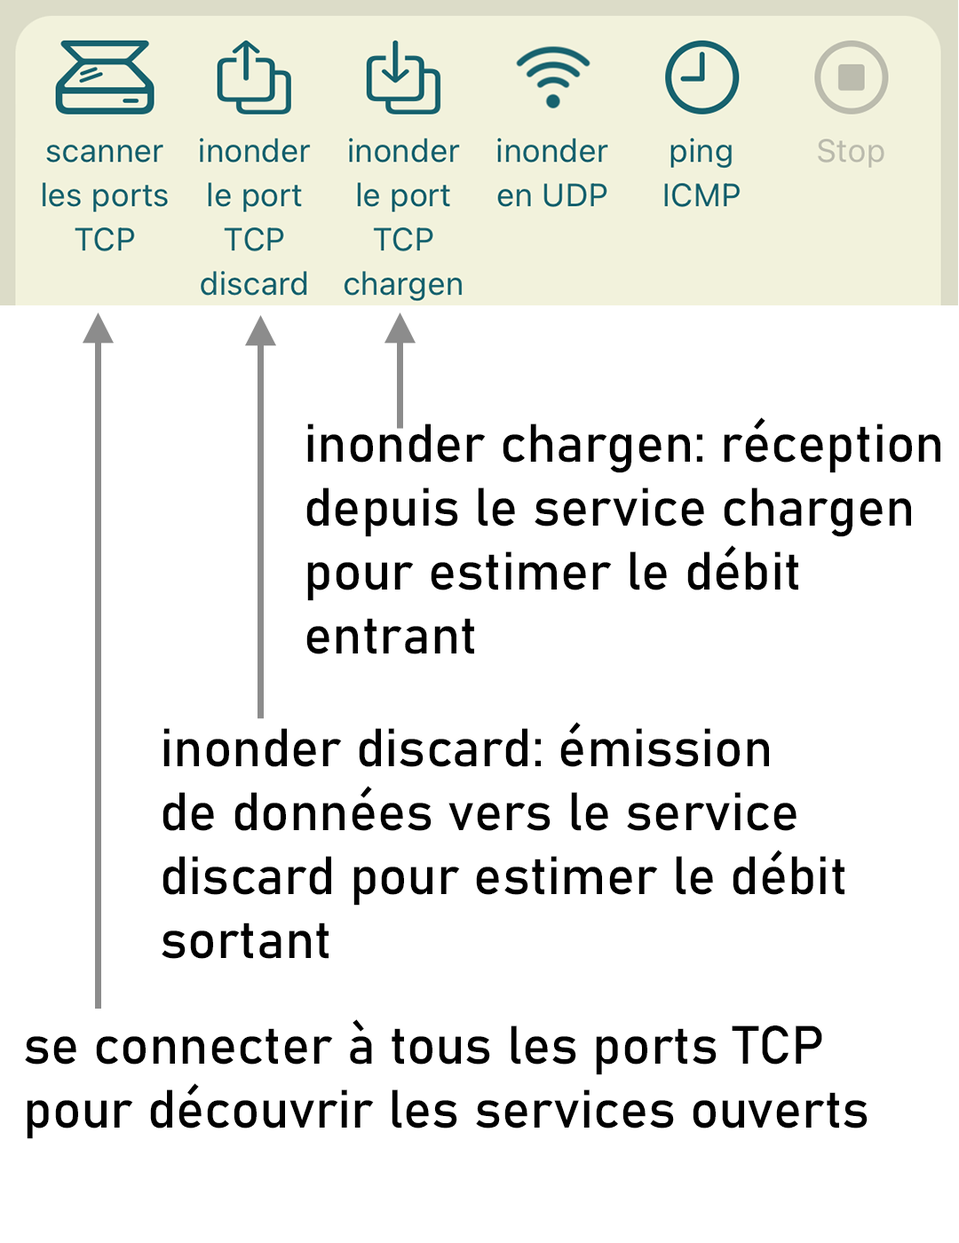
<style>
.page{position:relative;width:959px;height:1243px;background:#ffffff}
.page>*{position:absolute;margin:0}
.t1{font:53.3px "Bahnschrift";color:#000000}
</style>
<div class="page">
<p class="t1" style="left:306px;top:417px;width:634px;height:237px">inonder chargen: réception<br>depuis le service chargen<br>pour estimer le débit<br>entrant</p>
<p class="t1" style="left:162px;top:722px;width:683px;height:237px">inonder discard: émission<br>de données vers le service<br>discard pour estimer le débit<br>sortant</p>
<p class="t1" style="left:25px;top:1019px;width:843px;height:120px">se connecter à tous les ports TCP<br>pour découvrir les services ouverts</p>
</div>
